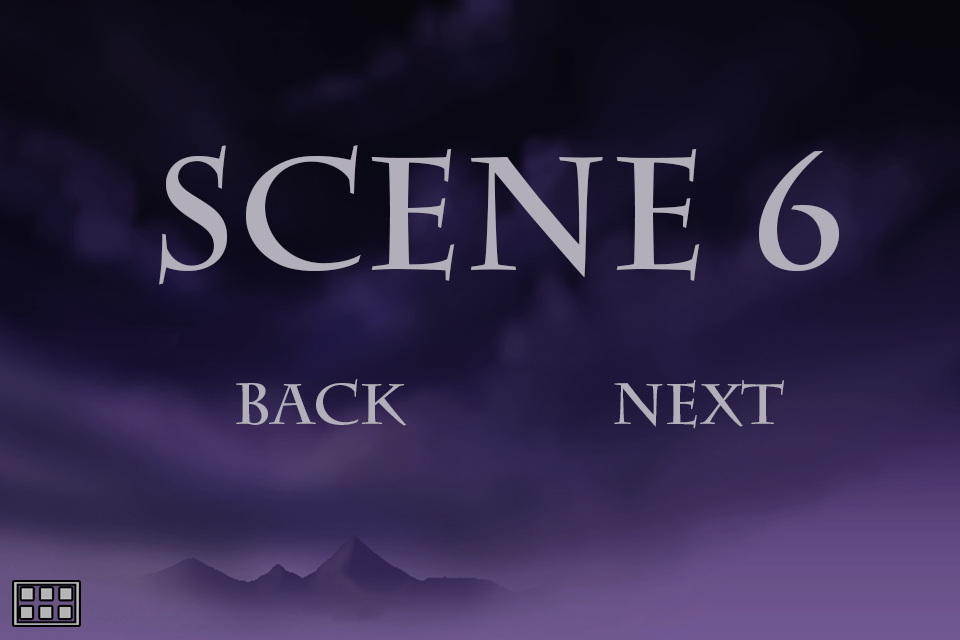
<style>
.page{position:relative;width:960px;height:640px}
.page>*{position:absolute;margin:0}
.t1{font:158px "CharlemagneStd-Bold";color:#b2afba}
.t2{font:57.7px "CharlemagneStd-Bold";color:#b2afba}
</style>
<div class="page">
<p class="t1" style="left:159px;top:145px;width:680px;height:140px">scene 6</p>
<p class="t2" style="left:236px;top:379px;width:170px;height:47px">back</p>
<p class="t2" style="left:614px;top:380px;width:170px;height:49px">Next</p>
</div>
